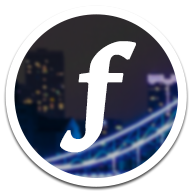
<style>
.page{position:relative;width:192px;height:192px;background:#ffffff}
.page>*{position:absolute;margin:0}
.t1{font:113px "Alegreya-BlackItalic";letter-spacing:-0.076em;color:#ffffff}
</style>
<div class="page">
<p class="t1" style="left:60px;top:41px;width:76px;height:112px">f</p>
</div>
